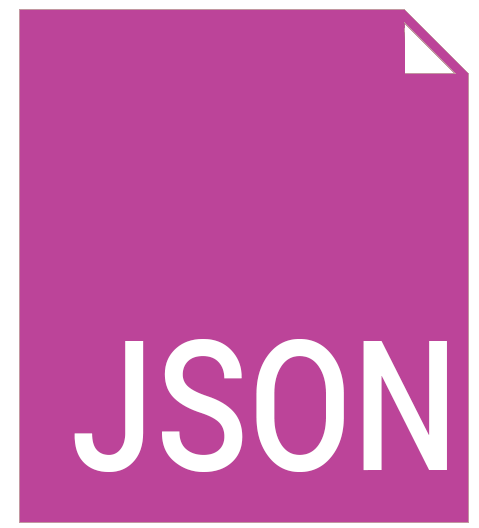
<style>
.page{position:relative;width:479px;height:528px;background:#bc4499}
.page>*{position:absolute;margin:0}
.t1{font:181.8px "Roboto-Medium";color:#ffffff;scale:0.83 1}
</style>
<div class="page">
<p class="t1" style="left:74px;top:339px;width:373px;height:133px">JSON</p>
</div>
